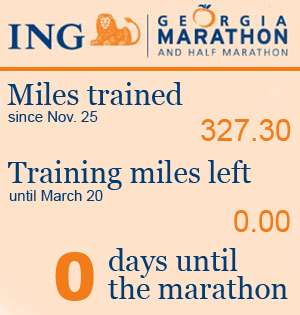
<style>
.page{position:relative;width:300px;height:315px;background:#fee2ca}
.page>*{position:absolute;margin:0}
.t1{font:30px "Georgia";color:#013c75}
.t2{font:15px "ArialMT";color:#013c75}
.t3{font:30px "ArialMT";color:#f27c1a}
.t4{font:65px "Arial-Black";color:#f27c1a}
.t5{font:30px/28px "Georgia";color:#013c75}
</style>
<div class="page">
<p class="t1" style="left:7px;top:82px;width:176px;height:23px">Miles trained</p>
<p class="t2" style="left:8px;top:111px;width:90px;height:11px">since Nov. 25</p>
<p class="t3" style="left:201px;top:119px;width:90px;height:22px">327.30</p>
<p class="t1" style="left:8px;top:160px;width:243px;height:30px">Training miles left</p>
<p class="t2" style="left:9px;top:190px;width:94px;height:11px">until March 20</p>
<p class="t3" style="left:234px;top:210px;width:56px;height:22px">0.00</p>
<p class="t4" style="left:55px;top:252px;width:39px;height:49px">0</p>
<p class="t5" style="left:108px;top:248px;width:180px;height:51px">days until <br>the marathon</p>
</div>
